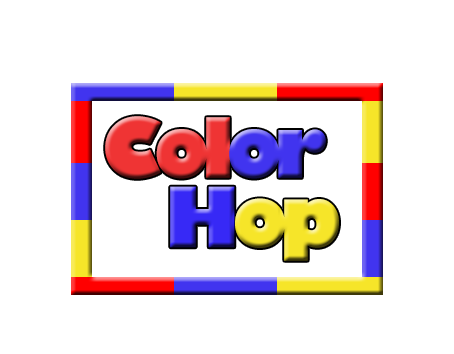
<style>
.page{position:relative;width:454px;height:354px;background:#ffffff}
.page>*{position:absolute;margin:0}
.t1{font:139.3px/11.6px "GillSans-UltraBold";letter-spacing:-0.1em;color:#ef3434;scale:0.95 1}
.t2{font:139.3px/11.6px "GillSans-UltraBold";letter-spacing:-0.1em;color:#000000;scale:0.95 1}
.t3{font:139.3px/11.6px "GillSans-UltraBold";letter-spacing:-0.1em;color:#4134ef;scale:0.95 1}
.t4{font:139.3px/11.6px "GillSans-UltraBold";letter-spacing:-0.1em;color:#3729f6;scale:0.95 1}
.t5{font:139.3px/11.6px "GillSans-UltraBold";letter-spacing:-0.1em;color:#f6e529;scale:0.95 1}
</style>
<div class="page">
<p class="t1" style="left:105px;top:116px;width:234px;height:145px;text-align:center"><span class="t2"><br><br><br></span><br><br>Col<span class="t3">or<br><br><br><br><br><br> </span><span class="t4">H</span><span class="t5">op</span></p>
</div>
